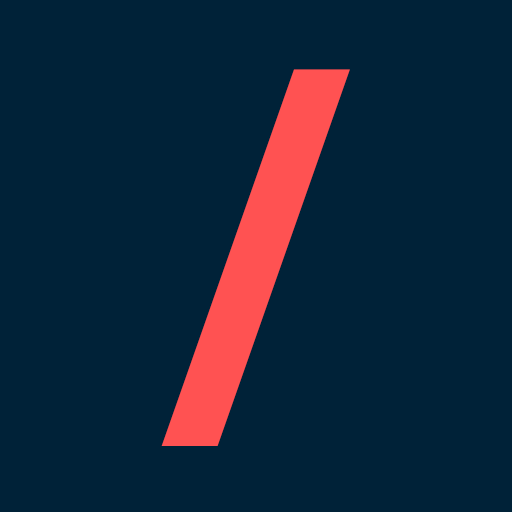
<style>
.page{position:relative;width:512px;height:512px;background:#002238}
.page>*{position:absolute;margin:0}
.t1{font:399.6px "Montserrat-Bold";color:#ff5252}
</style>
<div class="page">
<p class="t1" style="left:161px;top:69px;width:189px;height:377px">/</p>
</div>
